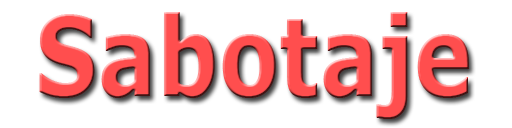
<style>
.page{position:relative;width:512px;height:128px;background:#ffffff}
.page>*{position:absolute;margin:0}
.t1{font:109.7px "Verdana-Bold";color:#ff4e4e;scale:0.81 1}
</style>
<div class="page">
<p class="t1" style="left:39px;top:12px;width:430px;height:107px">Sabotaje</p>
</div>
